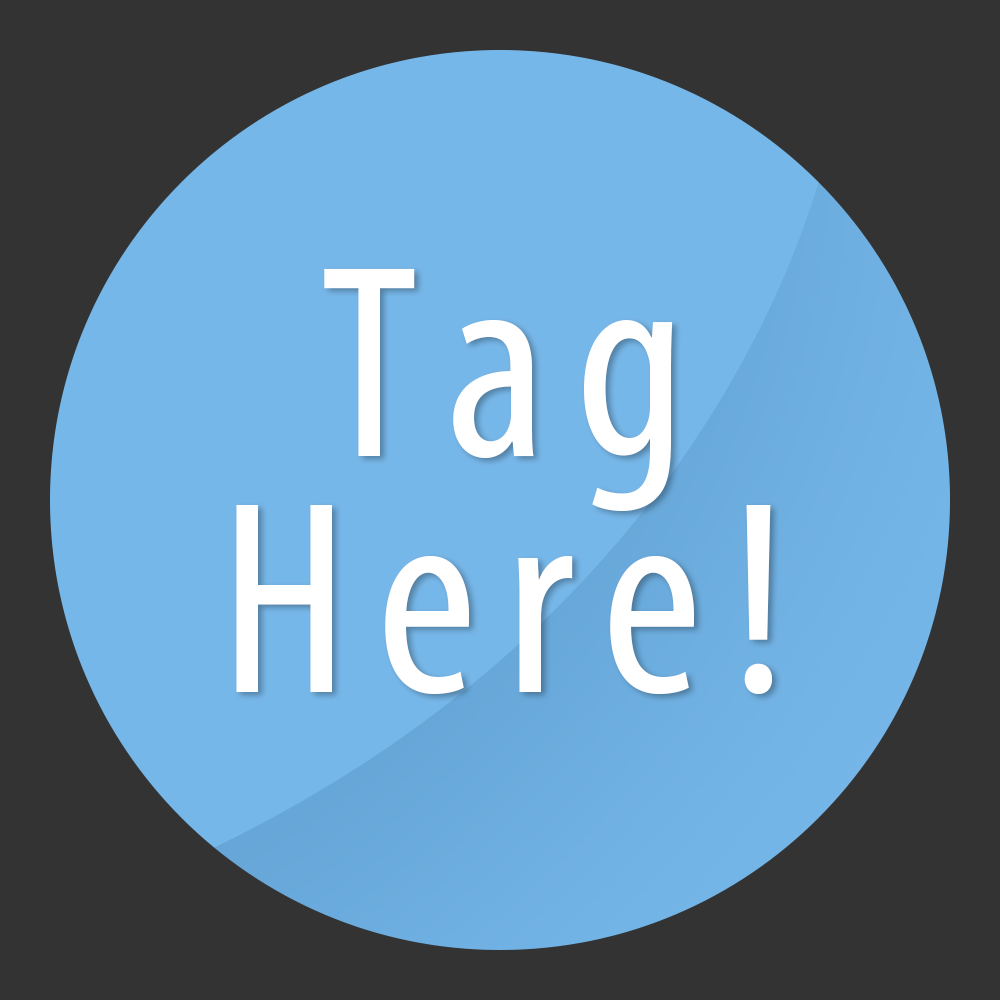
<style>
.page{position:relative;width:1000px;height:1000px;background:#333333}
.page>*{position:absolute;margin:0}
.t1{font:277.8px/236.1px "MyriadPro-Cond";letter-spacing:0.1em;color:#ffffff}
</style>
<div class="page">
<p class="t1" style="left:236px;top:268px;width:536px;height:427px;text-align:center">Tag<br>Here!</p>
</div>
